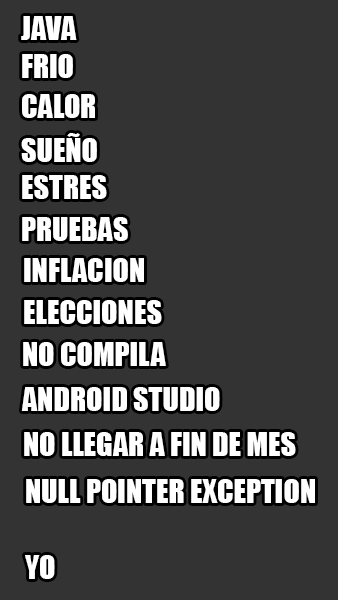
<style>
.page{position:relative;width:338px;height:600px;background:#333333}
.page>*{position:absolute;margin:0}
.t1{font:30px "Impact";color:#ffffff}
</style>
<div class="page">
<p class="t1" style="left:21px;top:16px;width:56px;height:24px">JAVA</p>
<p class="t1" style="left:22px;top:54px;width:51px;height:24px">FRIO</p>
<p class="t1" style="left:22px;top:94px;width:73px;height:24px">CALOR</p>
<p class="t1" style="left:21px;top:133px;width:76px;height:29px">SUEÑO</p>
<p class="t1" style="left:22px;top:175px;width:85px;height:24px">ESTRES</p>
<p class="t1" style="left:22px;top:217px;width:106px;height:24px">PRUEBAS</p>
<p class="t1" style="left:24px;top:258px;width:120px;height:24px">INFLACION</p>
<p class="t1" style="left:24px;top:300px;width:138px;height:24px">ELECCIONES</p>
<p class="t1" style="left:23px;top:342px;width:143px;height:24px">NO COMPILA</p>
<p class="t1" style="left:21px;top:387px;width:199px;height:24px">ANDROID STUDIO</p>
<p class="t1" style="left:24px;top:432px;width:272px;height:24px">NO LLEGAR A FIN DE MES</p>
<p class="t1" style="left:26px;top:479px;width:289px;height:24px">NULL POINTER EXCEPTION</p>
<p class="t1" style="left:25px;top:555px;width:30px;height:24px">YO</p>
</div>
